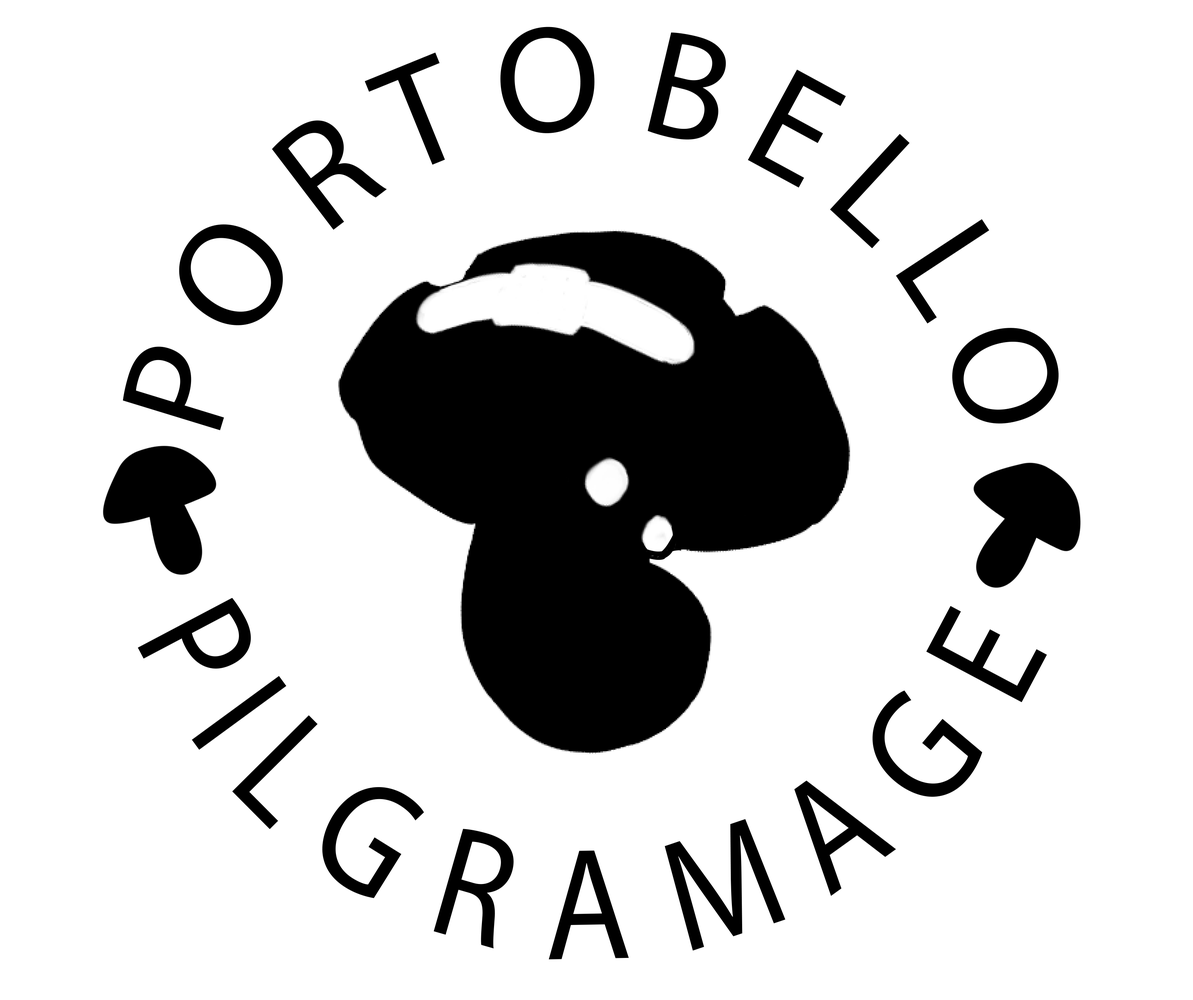
<style>
.page{position:relative;width:1193px;height:1000px;background:#ffffff}
.page>*{position:absolute;margin:0}
.t1{font:152.4px "GillSans-SemiBold";color:#000000}
.t2{font:160.1px "GillSans-SemiBold";color:#000000;scale:0.89 1}
</style>
<div class="page">
<p class="t1" style="left:500px;top:27px;width:94px;height:106px">O</p>
<p class="t1" style="left:647px;top:32px;width:79px;height:108px">B</p>
<p class="t1" style="left:364px;top:52px;width:81px;height:113px">T</p>
<p class="t1" style="left:747px;top:70px;width:99px;height:118px">E</p>
<p class="t1" style="left:272px;top:120px;width:115px;height:110px">R</p>
<p class="t1" style="left:830px;top:134px;width:79px;height:114px">L</p>
<p class="t1" style="left:896px;top:219px;width:93px;height:104px">L</p>
<p class="t1" style="left:179px;top:224px;width:104px;height:101px">O</p>
<p class="t1" style="left:952px;top:328px;width:106px;height:96px">O</p>
<p class="t1" style="left:123px;top:346px;width:101px;height:84px">P</p>
<p class="t2" style="left:138px;top:597px;width:113px;height:72px">P</p>
<p class="t2" style="left:926px;top:606px;width:121px;height:96px">E</p>
<p class="t2" style="left:192px;top:676px;width:94px;height:74px">I</p>
<p class="t2" style="left:872px;top:690px;width:110px;height:107px">G</p>
<p class="t2" style="left:232px;top:715px;width:86px;height:114px">L</p>
<p class="t2" style="left:794px;top:780px;width:102px;height:116px">A</p>
<p class="t2" style="left:322px;top:787px;width:102px;height:111px">G</p>
<p class="t2" style="left:664px;top:819px;width:121px;height:131px">M</p>
<p class="t2" style="left:434px;top:829px;width:80px;height:119px">R</p>
<p class="t2" style="left:548px;top:850px;width:81px;height:109px">A</p>
</div>
